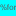
<style>
.page{position:relative;width:16px;height:16px;background:#00feff}
.page>*{position:absolute;margin:0}
.t1{font:8px "Helvetica"}
</style>
<div class="page">
<p class="t1" style="left:0px;top:4px;width:17px;height:7px">%for</p>
</div>
